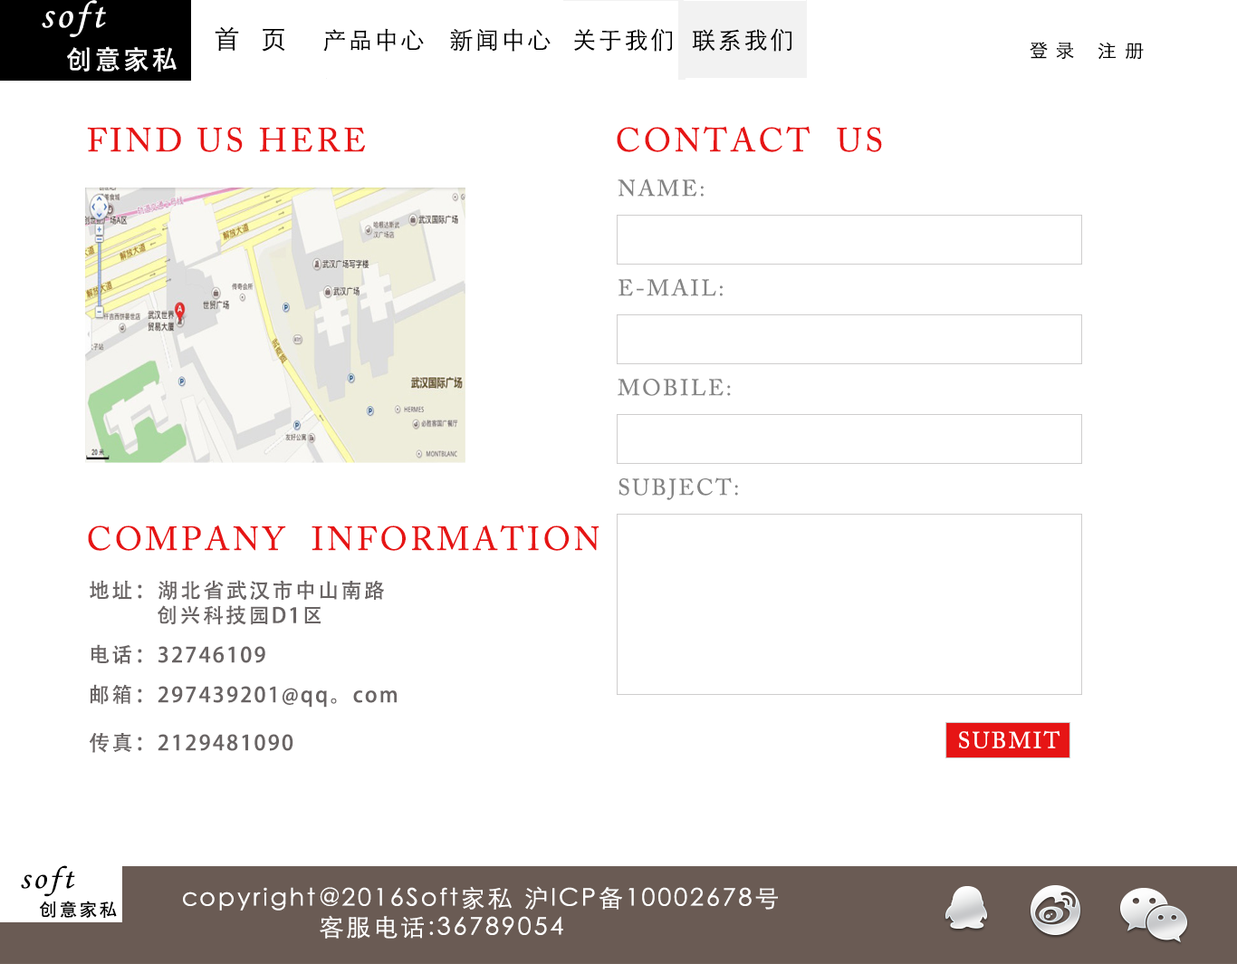
<style>
.page{position:relative;width:1237px;height:964px;background:#ffffff}
.page>*{position:absolute;margin:0}
.t1{font:38.7px "MonotypeCorsiva";letter-spacing:0.1em;color:#ffffff}
.t2{font:25.4px "STXihei";letter-spacing:0.1em;color:#000000}
.t3{font:23.7px "STXihei";letter-spacing:0.1em;color:#000000}
.t4{font:18.8px "STXihei";letter-spacing:0.1em;color:#000000;scale:0.96 1}
.t5{font:18px "STXihei";letter-spacing:0.1em;color:#000000;scale:1.05 1}
.t6{font:26.5px "AdobeHeitiStd-Regular";letter-spacing:0.1em;color:#ffffff}
.t7{font:33.2px "ACaslonPro-Regular";letter-spacing:0.1em;color:#e61515}
.t8{font:22.6px "ACaslonPro-Regular";letter-spacing:0.1em;color:#848484}
.t9{font:20.7px "AdobeHeitiStd-Regular";letter-spacing:0.1em;color:#696464}
.t10{font:22.6px "ACaslonPro-Regular";letter-spacing:0.1em;color:#ffffff}
.t11{font:32.1px "MonotypeCorsiva";letter-spacing:0.1em;color:#000000}
.t12{font:24.1px "STXihei";letter-spacing:0.1em;color:#ffffff}
.t13{font:17.9px "AdobeHeitiStd-Regular";letter-spacing:0.1em;color:#000000}
</style>
<div class="page">
<p class="t1" style="left:42px;top:0px;width:64px;height:37px">soft</p>
<p class="t2" style="left:215px;top:26px;width:70px;height:26px">首  页</p>
<p class="t3" style="left:323px;top:28px;width:101px;height:24px">产品中心</p>
<p class="t3" style="left:450px;top:28px;width:101px;height:24px">新闻中心</p>
<p class="t3" style="left:574px;top:28px;width:98px;height:24px">关于我们</p>
<p class="t3" style="left:692px;top:28px;width:100px;height:24px">联系我们</p>
<p class="t4" style="left:1030px;top:42px;width:44px;height:18px">登 录</p>
<p class="t5" style="left:1098px;top:42px;width:46px;height:17px">注 册</p>
<p class="t6" style="left:67px;top:46px;width:110px;height:26px">创意家私</p>
<p class="t7" style="left:617px;top:126px;width:265px;height:26px">CONTACT  US</p>
<p class="t7" style="left:87px;top:127px;width:278px;height:25px">FIND US HERE</p>
<p class="t8" style="left:618px;top:178px;width:86px;height:19px">NAME:</p>
<p class="t8" style="left:619px;top:278px;width:105px;height:18px">E-MAIL:</p>
<p class="t8" style="left:618px;top:379px;width:113px;height:17px">MOBILE:</p>
<p class="t8" style="left:619px;top:477px;width:119px;height:23px">SUBJECT:</p>
<p class="t7" style="left:88px;top:524px;width:512px;height:27px">COMPANY  INFORMATION</p>
<p class="t9" style="left:90px;top:580px;width:294px;height:45px">地址：湖北省武汉市中山南路<br>    创兴科技园D1区</p>
<p class="t9" style="left:91px;top:644px;width:174px;height:20px">电话：32746109</p>
<p class="t9" style="left:90px;top:684px;width:307px;height:23px">邮箱：297439201@qq。com</p>
<p class="t9" style="left:89px;top:733px;width:204px;height:20px">传真：2129481090</p>
<p class="t10" style="left:959px;top:730px;width:102px;height:18px">SUBMIT</p>
<p class="t11" style="left:21px;top:865px;width:54px;height:32px">soft</p>
<p class="t12" style="left:183px;top:886px;width:595px;height:52px">copyright@2016Soft家私 沪ICP备10002678号<br>                客服电话:36789054</p>
<p class="t13" style="left:40px;top:900px;width:77px;height:18px">创意家私</p>
</div>
